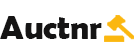
<style>
.page{position:relative;width:137px;height:55px;background:#ffffff}
.page>*{position:absolute;margin:0}
.t1{font:33.6px "BerlinSansFBDemi-Bold";color:#151414}
</style>
<div class="page">
<p class="t1" style="left:0px;top:16px;width:102px;height:23px">Auctnr</p>
</div>
